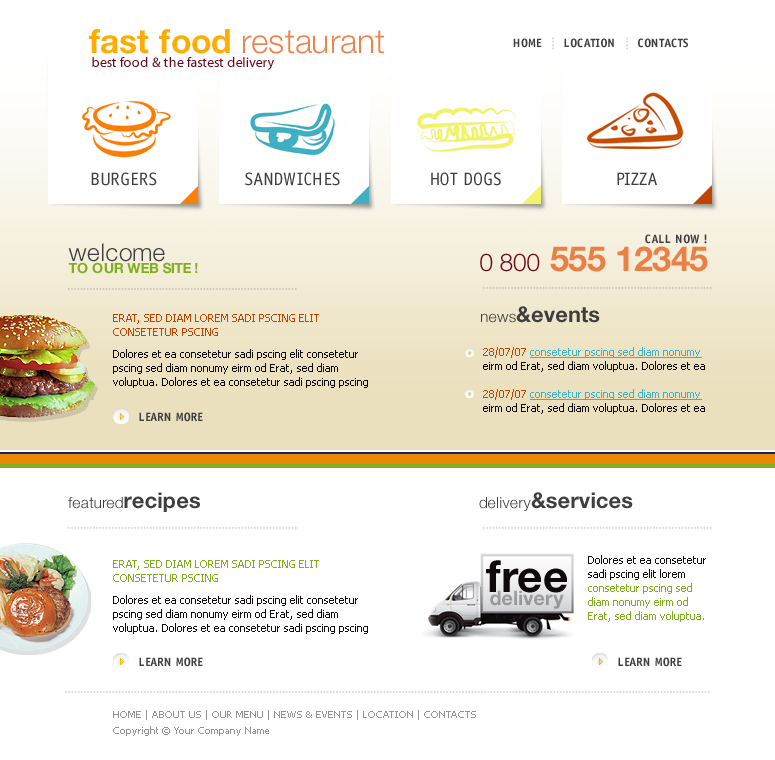
<style>
.page{position:relative;width:775px;height:760px;background:#ffffff}
.page>*{position:absolute;margin:0}
.t1{font:33.5px "HelveticaNeueLTPro-Lt";color:#ed844d}
.t2{font:33.5px "HelveticaNeueLTPro-Bd";color:#ffad03}
.t3{font:12px "OfficinaSansStd-Bold";color:#3e3e3e}
.t4{font:14px "MyriadPro-Regular";color:#6c061b}
.t5{font:18px "OfficinaSansStd-Book";color:#3e3e3e}
.t6{font:14px/12.6px "HelveticaNeueLTPro-Bd";color:#80af1e;text-transform:uppercase}
.t7{font:24.5px/12.6px "HelveticaNeueLTPro-Lt";color:#3e3e3e}
.t8{font:34.5px "HelveticaNeueLTPro-Bd";color:#ec7f44}
.t9{font:24.5px "HelveticaNeueLTPro-Lt";color:#6c061b}
.t10{font:11px/14px "Tahoma";color:#c14300}
.t11{font:21.8px "HelveticaNeueLTPro-Bd";color:#3e3e3e}
.t12{font:15.5px "HelveticaNeueLTPro-Lt";color:#3e3e3e}
.t13{font:11px/14px "Tahoma";color:#0f0b0c}
.t14{font:11px/14px "Tahoma";color:#3fb0c4;text-decoration:underline}
.t15{font:11px/14px "Tahoma";color:#80af1e}
.t16{font:44.5px "HelveticaNeueLTPro-Bd";color:#0f0b0c}
.t17{font:20px "HelveticaNeueLTPro-Bd";color:#9a999b}
.t18{font:10px/16px "Tahoma";color:#929292}
</style>
<div class="page">
<p class="t1" style="left:89px;top:29px;width:295px;height:25px"><span class="t2">fast food </span>restaurant</p>
<p class="t3" style="left:513px;top:38px;width:29px;height:10px">HOME</p>
<p class="t3" style="left:564px;top:38px;width:50px;height:10px">LOCATION</p>
<p class="t3" style="left:638px;top:38px;width:50px;height:10px">CONTACTS</p>
<p class="t4" style="left:92px;top:57px;width:182px;height:13px">best food &amp; the fastest delivery</p>
<p class="t5" style="left:91px;top:172px;width:66px;height:14px">BURGERS</p>
<p class="t5" style="left:245px;top:172px;width:95px;height:14px">SANDWICHES</p>
<p class="t5" style="left:431px;top:172px;width:70px;height:14px">HOT DOGS</p>
<p class="t5" style="left:617px;top:172px;width:40px;height:13px">PIZZA</p>
<p class="t6" style="left:68px;top:243px;width:130px;height:31px"><span class="t7">welcome<br></span>to our web site !</p>
<p class="t8" style="left:480px;top:246px;width:228px;height:26px"><span class="t9">0 800 </span>555 12345</p>
<p class="t3" style="left:645px;top:234px;width:62px;height:10px">CALL NOW !</p>
<p class="t10" style="left:113px;top:314px;width:206px;height:22px">ERAT, SED DIAM LOREM SADI PSCING ELIT CONSETETUR PSCING</p>
<p class="t11" style="left:481px;top:306px;width:119px;height:17px"><span class="t12">news</span>&amp;events</p>
<p class="t13" style="left:113px;top:349px;width:255px;height:39px">Dolores et ea consetetur sadi pscing elit consetetur pscing sed diam nonumy eirm od Erat, sed diam voluptua. Dolores et ea consetetur sadi pscing pscing</p>
<p class="t13" style="left:483px;top:347px;width:222px;height:67px"><span class="t10">28/07/07 </span><span class="t14">consetetur pscing sed diam nonumy </span>eirm od Erat, sed diam voluptua. Dolores et ea <br><br><span class="t10">28/07/07 </span><span class="t14">consetetur pscing sed diam nonumy </span>eirm od Erat, sed diam voluptua. Dolores et ea</p>
<p class="t3" style="left:139px;top:412px;width:64px;height:10px">LEARN MORE</p>
<p class="t12" style="left:68px;top:492px;width:132px;height:20px">featured<span class="t11">recipes</span></p>
<p class="t11" style="left:479px;top:492px;width:154px;height:19px"><span class="t12">delivery</span>&amp;services</p>
<p class="t15" style="left:588px;top:555px;width:118px;height:67px"><span class="t13">Dolores et ea consetetur sadi pscing elit lorem </span>consetetur pscing sed diam nonumy eirm od Erat, sed diam voluptua.</p>
<p class="t15" style="left:113px;top:560px;width:206px;height:22px">ERAT, SED DIAM LOREM SADI PSCING ELIT CONSETETUR PSCING</p>
<p class="t16" style="left:486px;top:560px;width:81px;height:33px">free</p>
<p class="t17" style="left:490px;top:590px;width:74px;height:19px">delivery</p>
<p class="t13" style="left:113px;top:595px;width:255px;height:39px">Dolores et ea consetetur sadi pscing elit consetetur pscing sed diam nonumy eirm od Erat, sed diam voluptua. Dolores et ea consetetur sadi pscing pscing</p>
<p class="t3" style="left:139px;top:657px;width:64px;height:10px">LEARN MORE</p>
<p class="t3" style="left:618px;top:657px;width:64px;height:10px">LEARN MORE</p>
<p class="t18" style="left:113px;top:710px;width:363px;height:26px">HOME | ABOUT US | OUR MENU | NEWS &amp; EVENTS | LOCATION | CONTACTS<br>Copyright © Your Company Name</p>
</div>
